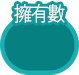
<style>
.page{position:relative;width:79px;height:75px;background:#078081}
.page>*{position:absolute;margin:0}
.t1{font:20px "GothicMB101Pr6N-Light";letter-spacing:-0.08em;color:#fff6f3;scale:0.9 1}
</style>
<div class="page">
<p class="t1" style="left:14px;top:3px;width:51px;height:20px">擁有數</p>
</div>
